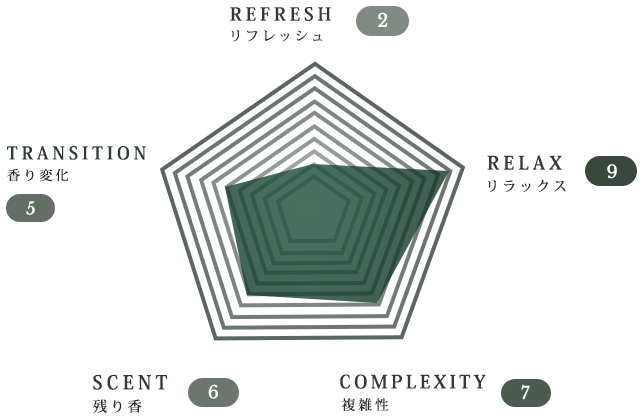
<style>
.page{position:relative;width:640px;height:420px;background:#ffffff}
.page>*{position:absolute;margin:0}
.t1{font:17.9px "KozMinPr6N-Bold";letter-spacing:0.22em;color:#27452e}
.t2{font:17.9px "LibreBaskerville-Regular";letter-spacing:0.06em;color:#ffffff}
.t3{font:13.4px "KozMinPr6N-Medium";letter-spacing:0.22em;color:#253125}
.t4{font:17.5px "KozMinPr6N-Bold";letter-spacing:0.22em;color:#27452e}
.t5{font:18.4px "KozMinPr6N-Bold";letter-spacing:0.22em;color:#27452e}
.t6{font:13.1px "KozMinPr6N-Medium";letter-spacing:0.22em;color:#20381f}
.t7{font:17.7px "LibreBaskerville-Regular";letter-spacing:0.06em;color:#ffffff}
.t8{font:13.8px "KozMinPr6N-Medium";letter-spacing:0.22em;color:#20381f}
.t9{font:16.8px "LibreBaskerville-Regular";letter-spacing:0.06em;color:#ffffff}
.t10{font:18.9px "KozMinPr6N-Bold";letter-spacing:0.22em;color:#27452e}
.t11{font:18.2px "KozMinPr6N-Bold";letter-spacing:0.18em;color:#27452e}
.t12{font:17.4px "LibreBaskerville-Regular";letter-spacing:0.06em;color:#ffffff}
.t13{font:17.1px "LibreBaskerville-Regular";letter-spacing:0.06em;color:#ffffff}
.t14{font:14.2px "KozMinPr6N-Medium";letter-spacing:0.22em;color:#20381f}
.t15{font:13.7px "KozMinPr6N-Medium";letter-spacing:0.22em;color:#253125}
</style>
<div class="page">
<p class="t1" style="left:230px;top:7px;width:101px;height:14px">REFRESH</p>
<p class="t2" style="left:378px;top:12px;width:10px;height:15px">2</p>
<p class="t3" style="left:231px;top:30px;width:92px;height:12px">リフレッシュ</p>
<p class="t4" style="left:6px;top:146px;width:140px;height:14px">TRANSITION</p>
<p class="t5" style="left:487px;top:155px;width:75px;height:15px">RELAX</p>
<p class="t6" style="left:7px;top:168px;width:62px;height:14px">香り変化</p>
<p class="t7" style="left:607px;top:164px;width:10px;height:15px">9</p>
<p class="t8" style="left:488px;top:179px;width:78px;height:13px">リラックス</p>
<p class="t9" style="left:26px;top:201px;width:9px;height:14px">5</p>
<p class="t10" style="left:93px;top:374px;width:75px;height:16px">SCENT</p>
<p class="t11" style="left:340px;top:374px;width:146px;height:15px">COMPLEXITY</p>
<p class="t12" style="left:208px;top:384px;width:10px;height:15px">6</p>
<p class="t13" style="left:521px;top:384px;width:9px;height:16px">7</p>
<p class="t14" style="left:93px;top:399px;width:49px;height:14px">残り香</p>
<p class="t15" style="left:341px;top:398px;width:48px;height:14px">複雑性</p>
</div>
